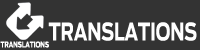
<style>
.page{position:relative;width:200px;height:50px;background:#333333}
.page>*{position:absolute;margin:0}
.t1{font:24px "Antenna-Bold";color:#ffffff;scale:0.71 1}
.t2{font:7.8px "Antenna-Bold";color:#ffffff;scale:0.71 1}
</style>
<div class="page">
<p class="t1" style="left:48px;top:22px;width:149px;height:19px">TRANSLATIONS</p>
<p class="t2" style="left:0px;top:41px;width:49px;height:7px">TRANSLATIONS</p>
</div>
